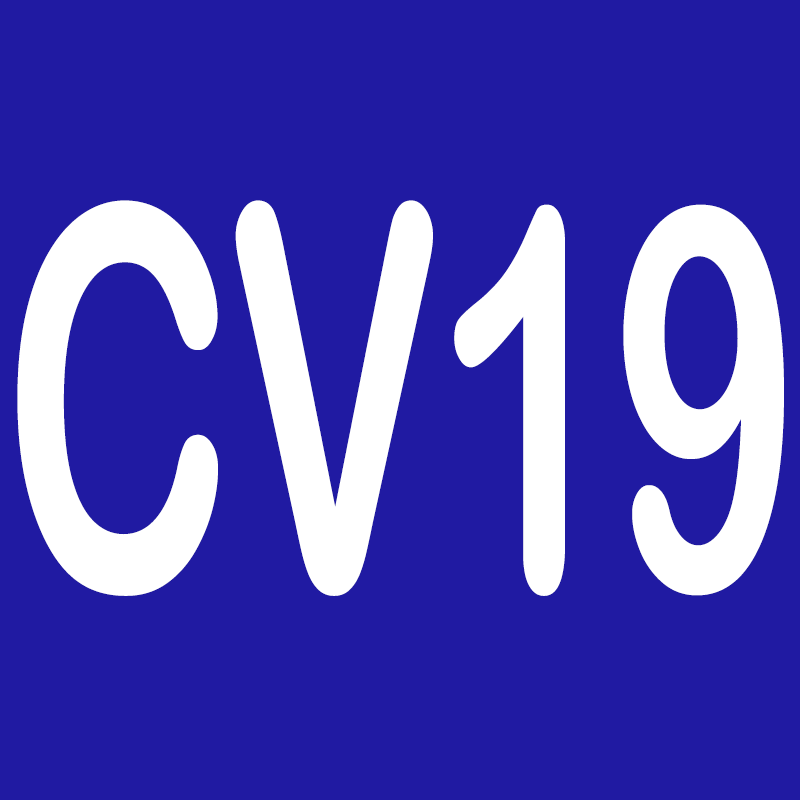
<style>
.page{position:relative;width:800px;height:800px;background:#201aa2}
.page>*{position:absolute;margin:0}
.t1{font:533.8px "ArialRoundedMTBold";letter-spacing:-0.025em;color:#ffffff;scale:0.59 1}
</style>
<div class="page">
<p class="t1" style="left:17px;top:200px;width:767px;height:396px">CV19</p>
</div>
